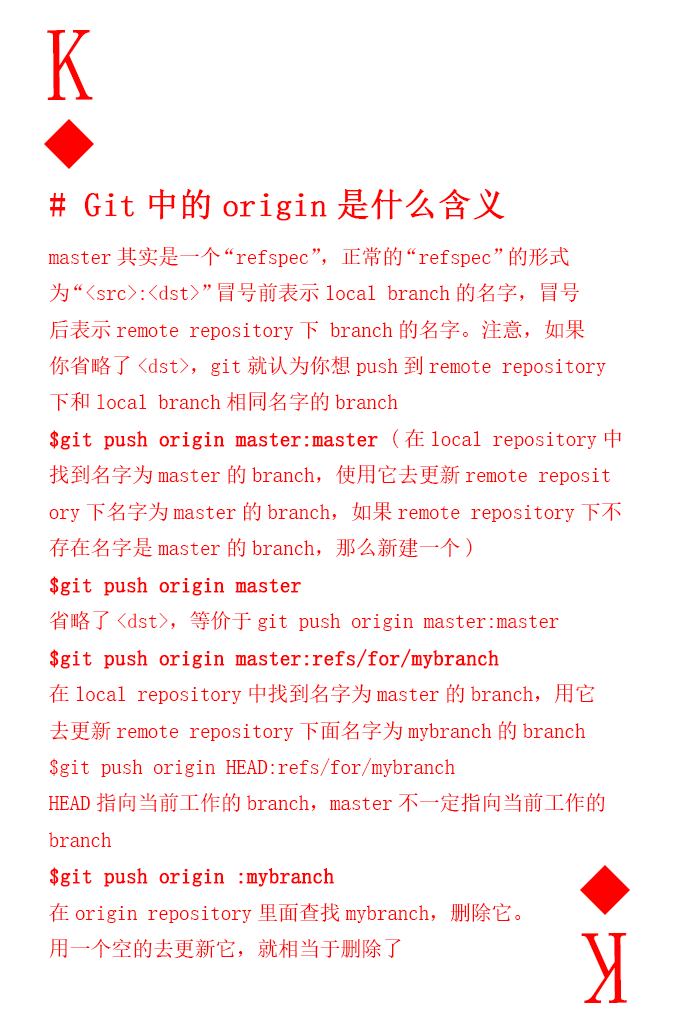
<style>
.page{position:relative;width:673px;height:1028px;background:#ffffff}
.page>*{position:absolute;margin:0}
.t1{font:104.2px "SimSun-ExtB";color:#ff0101;scale:0.93 1}
.t2{font:20.8px "SimSun";color:#ff0101}
.t3{font:33.3px "SimSun";color:#ff0101;font-weight:bold}
.t4{font:20.8px "SimSun";color:#ff0101;font-weight:bold}
</style>
<div class="page">
<p class="t1" style="left:47px;top:30px;width:46px;height:70px">K</p>
<p class="t2" style="left:48px;top:189px;width:573px;height:769px"><span class="t3"># Git中的origin是什么含义<br></span>master其实是一个“refspec”，正常的“refspec”的形式<br>为“&lt;src&gt;:&lt;dst&gt;”冒号前表示local branch的名字，冒号<br>后表示remote repository下 branch的名字。注意，如果<br>你省略了&lt;dst&gt;，git就认为你想push到remote repository<br>下和local branch相同名字的branch<br><span class="t4">$git push origin master:master</span> (在local repository中<br>找到名字为master的branch，使用它去更新remote reposit<br>ory下名字为master的branch，如果remote repository下不<br>存在名字是master的branch，那么新建一个)<span class="t4"><br>$git push origin master<br></span>省略了&lt;dst&gt;，等价于git push origin master:master<span class="t4"><br>$git push origin master:refs/for/mybranch <br></span>在local repository中找到名字为master的branch，用它<br>去更新remote repository下面名字为mybranch的branch<br>$git push origin HEAD:refs/for/mybranch <br>HEAD指向当前工作的branch，master不一定指向当前工作的<br>branch<span class="t4"><br>$git push origin :mybranch <br></span>在origin repository里面查找mybranch，删除它。<br>用一个空的去更新它，就相当于删除了</p>
<p class="t1" style="left:581px;top:933px;width:46px;height:70px;rotate:180deg">K</p>
</div>
